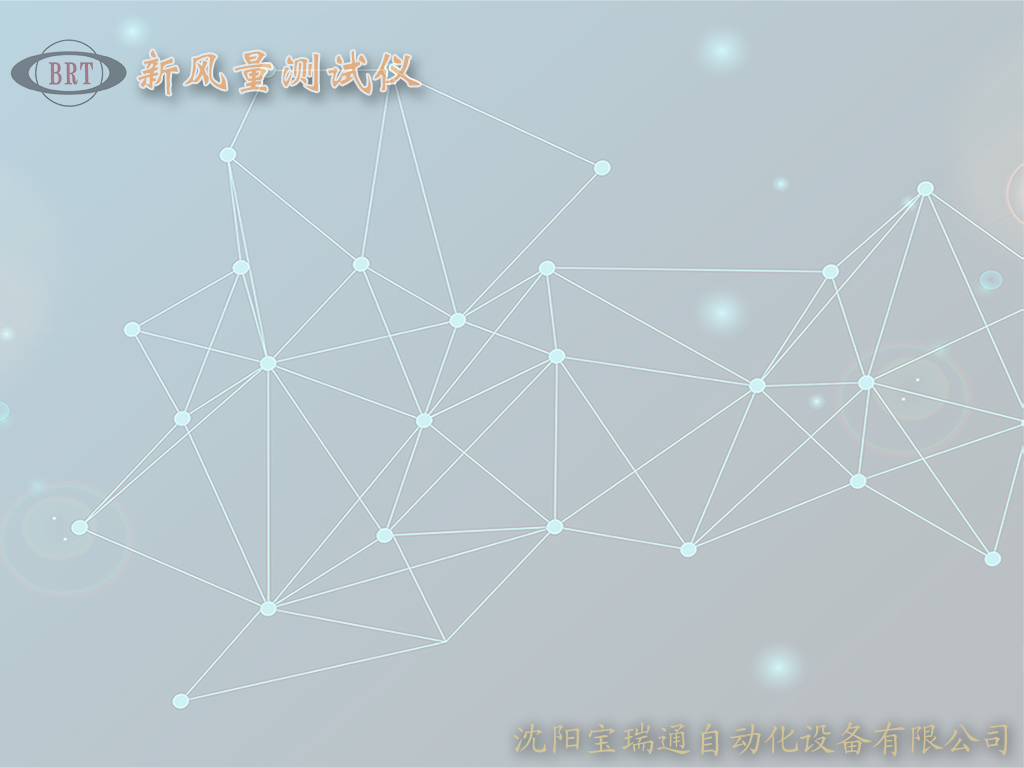
<style>
.page{position:relative;width:1024px;height:768px}
.page>*{position:absolute;margin:0}
.t1{font:48px "CTWeiBeiSJ";color:#e2af81}
.t2{font:36px "KaiTi_GB2312";color:#d3c495}
</style>
<div class="page">
<p class="t1" style="left:138px;top:50px;width:283px;height:45px">新风量测试仪</p>
<p class="t2" style="left:513px;top:721px;width:495px;height:36px">沈阳宝瑞通自动化设备有限公司</p>
</div>
